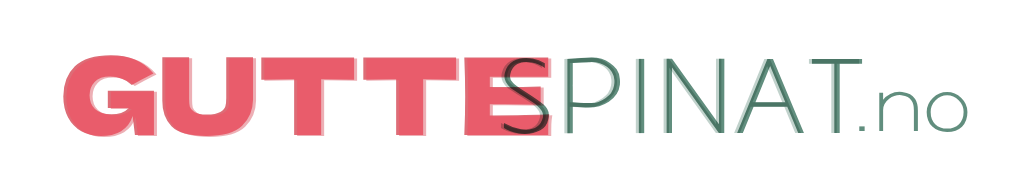
<style>
.page{position:relative;width:1024px;height:192px;background:#ffffff}
.page>*{position:absolute;margin:0}
.t1{font:106.9px "DelaGothicOne-Regular";color:#dc636e}
.t2{font:92.6px "AaarghNormal";scale:1.16 1}
.t3{font:92.6px "AaarghNormal";color:#588776;scale:1.16 1}
.t4{font:66px "AaarghNormal";color:#588776;scale:1.16 1}
</style>
<div class="page">
<p class="t1" style="left:63px;top:55px;width:487px;height:81px">GUTTE</p>
<p class="t1" style="left:66px;top:56px;width:487px;height:81px">GUTTE</p>
<p class="t2" style="left:500px;top:57px;width:360px;height:77px">SPINAT</p>
<p class="t3" style="left:503px;top:57px;width:360px;height:77px">SPINAT</p>
<p class="t4" style="left:859px;top:91px;width:109px;height:41px">.no</p>
</div>
